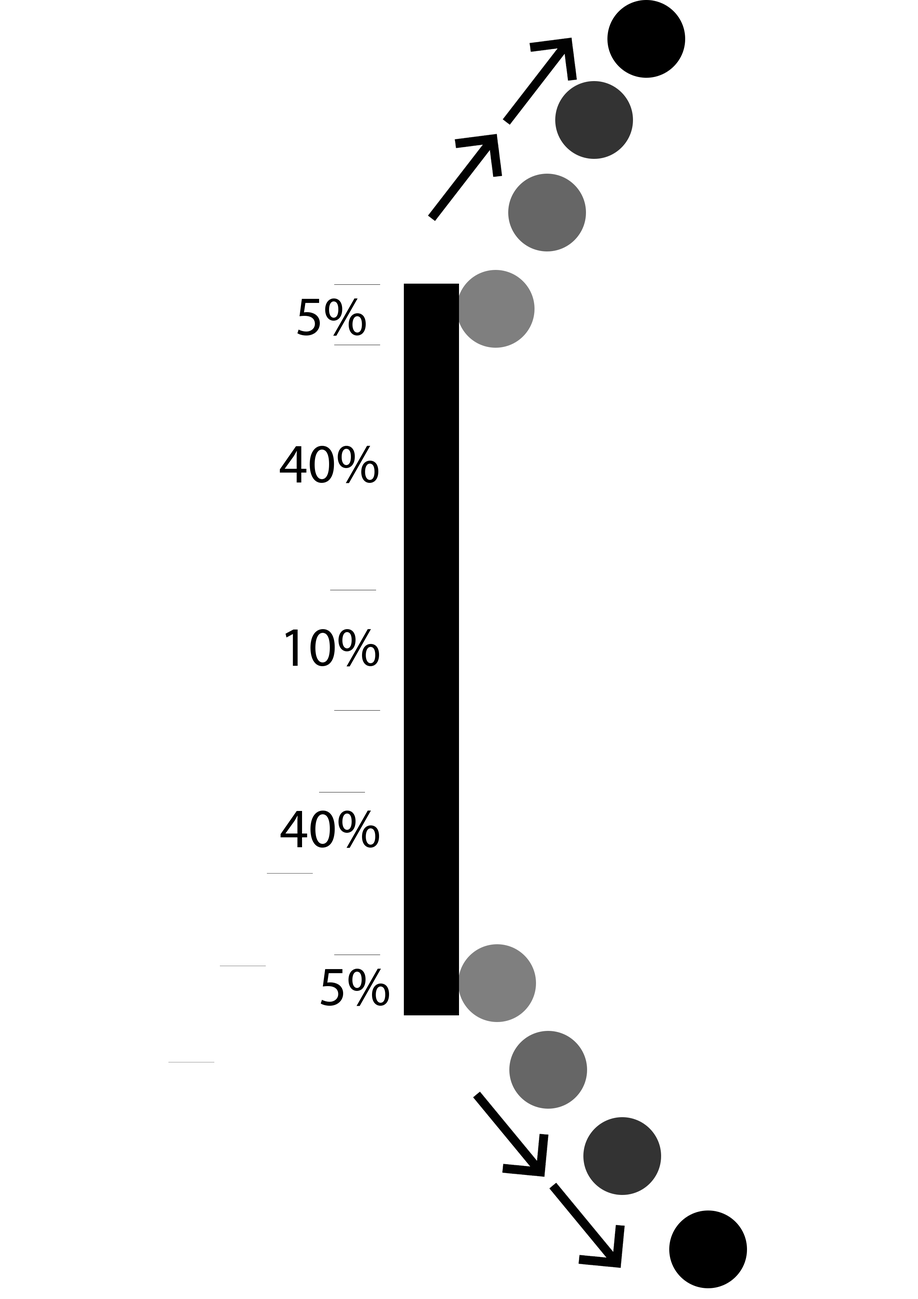
<style>
.page{position:relative;width:918px;height:1299px;background:#ffffff}
.page>*{position:absolute;margin:0}
.t1{font:55.5px "MyriadPro-Regular";color:#000000}
</style>
<div class="page">
<p class="t1" style="left:297px;top:298px;width:69px;height:38px">5%</p>
<p class="t1" style="left:280px;top:445px;width:98px;height:38px">40%</p>
<p class="t1" style="left:285px;top:629px;width:94px;height:37px">10%</p>
<p class="t1" style="left:281px;top:810px;width:98px;height:38px">40%</p>
<p class="t1" style="left:321px;top:968px;width:68px;height:38px">5%</p>
</div>
